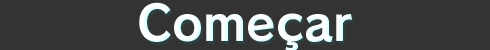
<style>
.page{position:relative;width:490px;height:50px;background:#333333}
.page>*{position:absolute;margin:0}
.t1{font:48px "RodinPro-B";color:#fffeff}
</style>
<div class="page">
<p class="t1" style="left:139px;top:2px;width:213px;height:49px">Começar</p>
</div>
